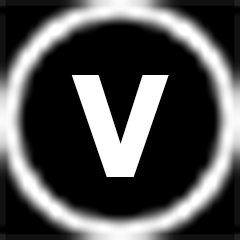
<style>
.page{position:relative;width:240px;height:240px;background:#000000}
.page>*{position:absolute;margin:0}
.t1{font:140px "Tahoma-Bold";color:#ffffff}
</style>
<div class="page">
<p class="t1" style="left:71px;top:75px;width:98px;height:102px">V</p>
</div>
